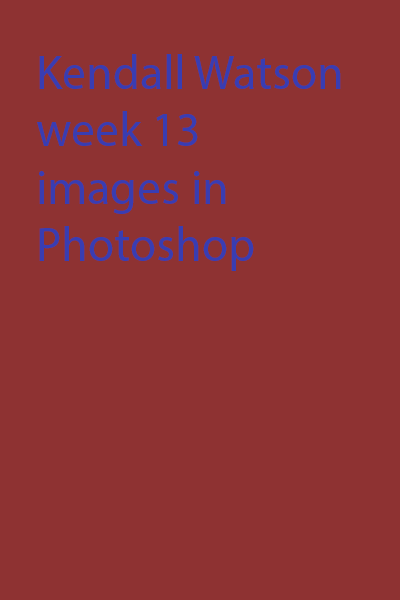
<style>
.page{position:relative;width:400px;height:600px;background:#8e3232}
.page>*{position:absolute;margin:0}
.t1{font:48px "MyriadPro-Regular";color:#393db2}
</style>
<div class="page">
<p class="t1" style="left:37px;top:54px;width:304px;height:217px">Kendall Watson<br>week 13 images in Photoshop</p>
</div>
